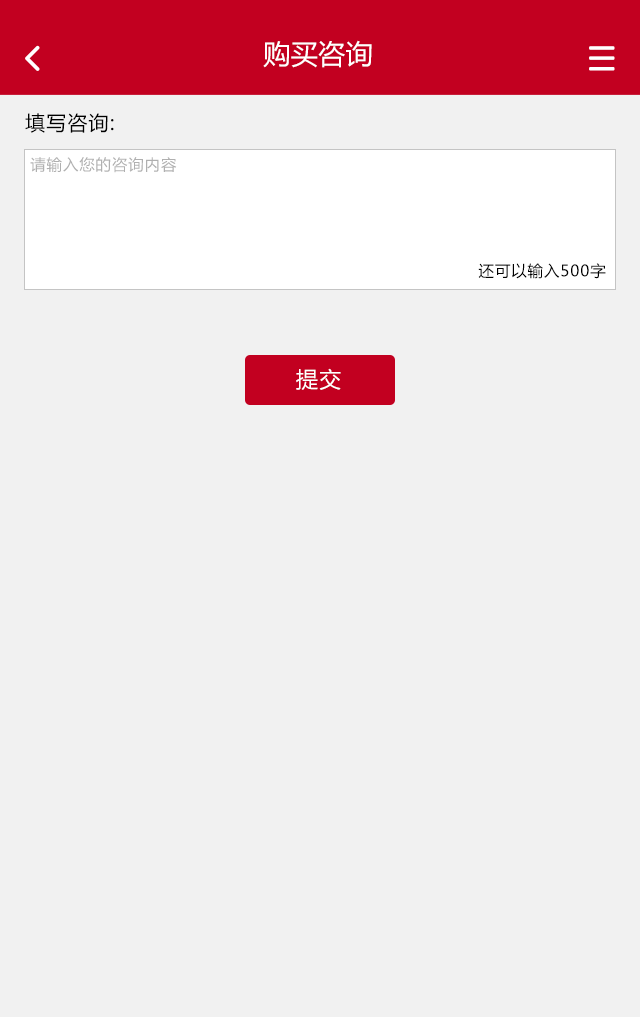
<style>
.page{position:relative;width:640px;height:1017px;background:#f1f1f1}
.page>*{position:absolute;margin:0}
.t1{font:27.3px "MicrosoftYaHei";color:#ffffff}
.t2{font:20px "MicrosoftYaHei";letter-spacing:0.06em;color:#000000}
.t3{font:15.4px "MicrosoftYaHei";letter-spacing:0.06em;color:#b0b0b0}
.t4{font:15.4px "MicrosoftYaHei";letter-spacing:0.06em;color:#000000}
.t5{font:22px "MicrosoftYaHei";letter-spacing:0.06em;color:#ffffff}
</style>
<div class="page">
<p class="t1" style="left:263px;top:40px;width:109px;height:28px">购买咨询</p>
<p class="t2" style="left:25px;top:113px;width:89px;height:20px">填写咨询:</p>
<p class="t3" style="left:30px;top:157px;width:147px;height:16px">请输入您的咨询内容</p>
<p class="t4" style="left:478px;top:263px;width:128px;height:16px">还可以输入500字</p>
<p class="t5" style="left:296px;top:368px;width:45px;height:22px">提交</p>
</div>
